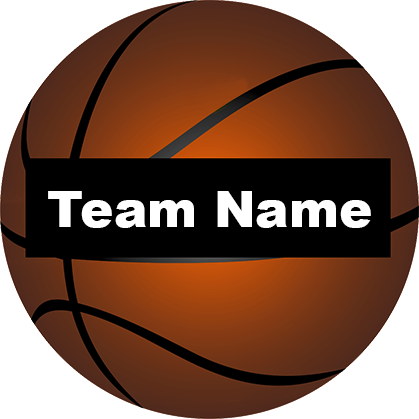
<style>
.page{position:relative;width:419px;height:419px;background:#ffffff}
.page>*{position:absolute;margin:0}
.t1{font:50px "Arial-Black";color:#ffffff}
</style>
<div class="page">
<p class="t1" style="left:48px;top:191px;width:323px;height:37px">Team Name</p>
</div>
